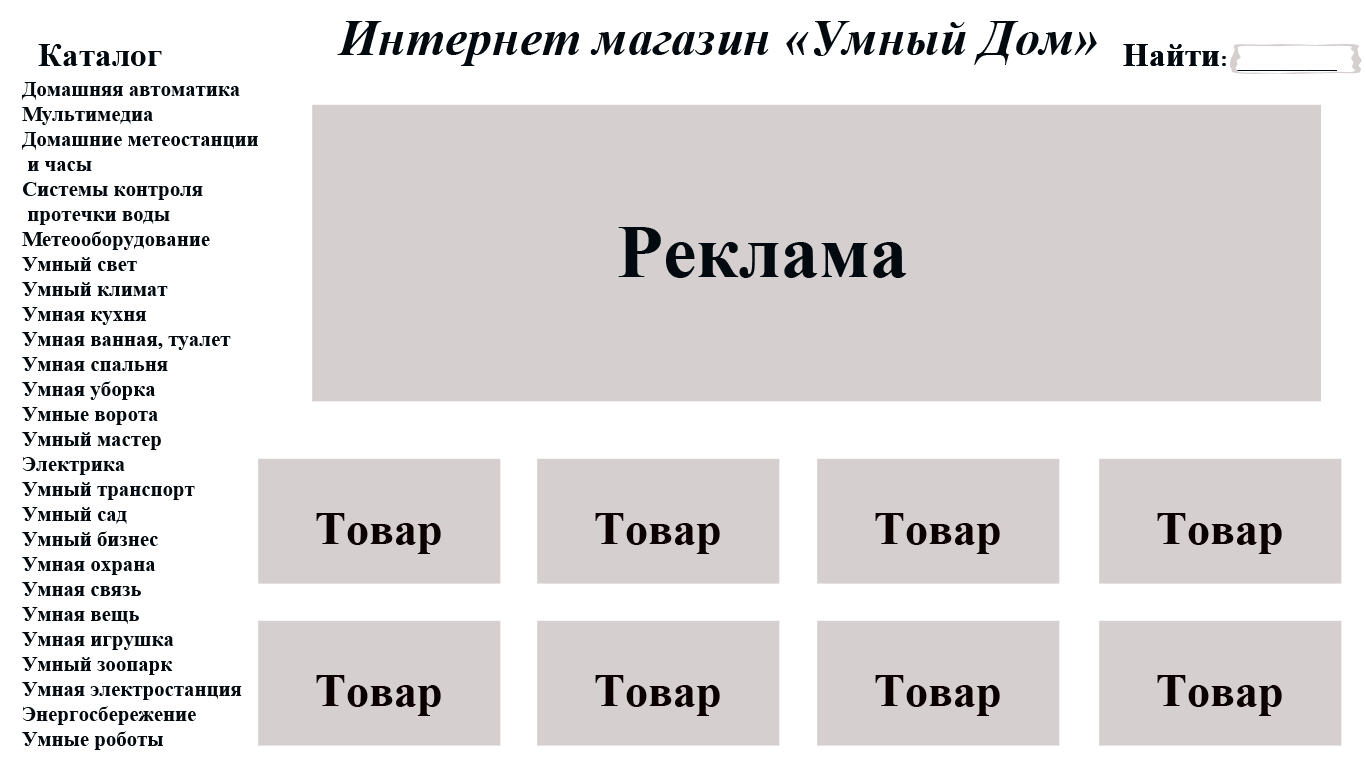
<style>
.page{position:relative;width:1366px;height:768px;background:#d5cfcf}
.page>*{position:absolute;margin:0}
.t1{font:50px "TimesNewRomanPS-BoldItalicMT";color:#020a0f}
.t2{font:33.3px "TimesNewRomanPS-BoldMT";color:#020a0f}
.t3{font:20.8px "TimesNewRomanPS-BoldMT";color:#020a0f}
</style>
<div class="page">
<p class="t1" style="left:337px;top:21px;width:760px;height:45px">Интернет магазин «Умный Дом»</p>
<p class="t2" style="left:38px;top:44px;width:124px;height:22px">Каталог</p>
<p class="t3" style="left:1123px;top:44px;width:214px;height:27px"><span class="t2">Найти</span>: __________</p>
<p class="t3" style="left:1123px;top:44px;width:214px;height:27px"><span class="t2">Найти</span>: __________</p>
<p class="t3" style="left:22px;top:82px;width:236px;height:668px">Домашняя автоматика<br>Мультимедиа<br>Домашние метеостанции<br> и часы<br>Системы контроля<br> протечки воды<br>Метеооборудование<br>Умный свет<br>Умный климат<br>Умная кухня<br>Умная ванная, туалет<br>Умная спальня<br>Умная уборка<br>Умные ворота<br>Умный мастер<br>Электрика<br>Умный транспорт<br>Умный сад<br>Умный бизнес<br>Умная охрана<br>Умная связь<br>Умная вещь<br>Умная игрушка<br>Умный зоопарк<br>Умная электростанция<br>Энергосбережение<br>Умные роботы</p>
</div>
